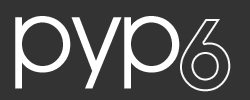
<style>
.page{position:relative;width:250px;height:100px;background:#333333}
.page>*{position:absolute;margin:0}
.t1{font:100px "AvantGardeITCbyBT-Book";color:#ffffff}
.t2{font:100px "AvantGardeITCbyBT-Demi"}
</style>
<div class="page">
<p class="t1" style="left:15px;top:16px;width:165px;height:73px">pyp</p>
<p class="t2" style="left:180px;top:19px;width:51px;height:73px">6</p>
</div>
